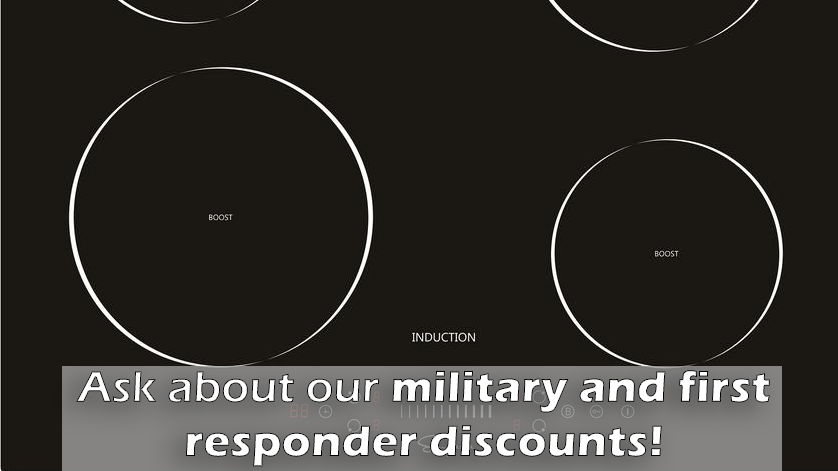
<style>
.page{position:relative;width:838px;height:471px;background:#1b1813}
.page>*{position:absolute;margin:0}
.t1{font:45.2px "ErasITC-Bold";color:#ffffff}
.t2{font:45.2px "ErasITC-Demi";color:#ffffff}
</style>
<div class="page">
<p class="t1" style="left:76px;top:370px;width:694px;height:97px;text-align:center"><span class="t2">Ask about our </span>military and first<br>responder discounts!</p>
</div>
